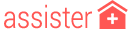
<style>
.page{position:relative;width:132px;height:31px;background:#ffffff}
.page>*{position:absolute;margin:0}
.t1{font:30.2px "Roboto-Light";color:#ff5754;scale:0.85 1}
</style>
<div class="page">
<p class="t1" style="left:4px;top:4px;width:88px;height:25px">assister</p>
</div>
